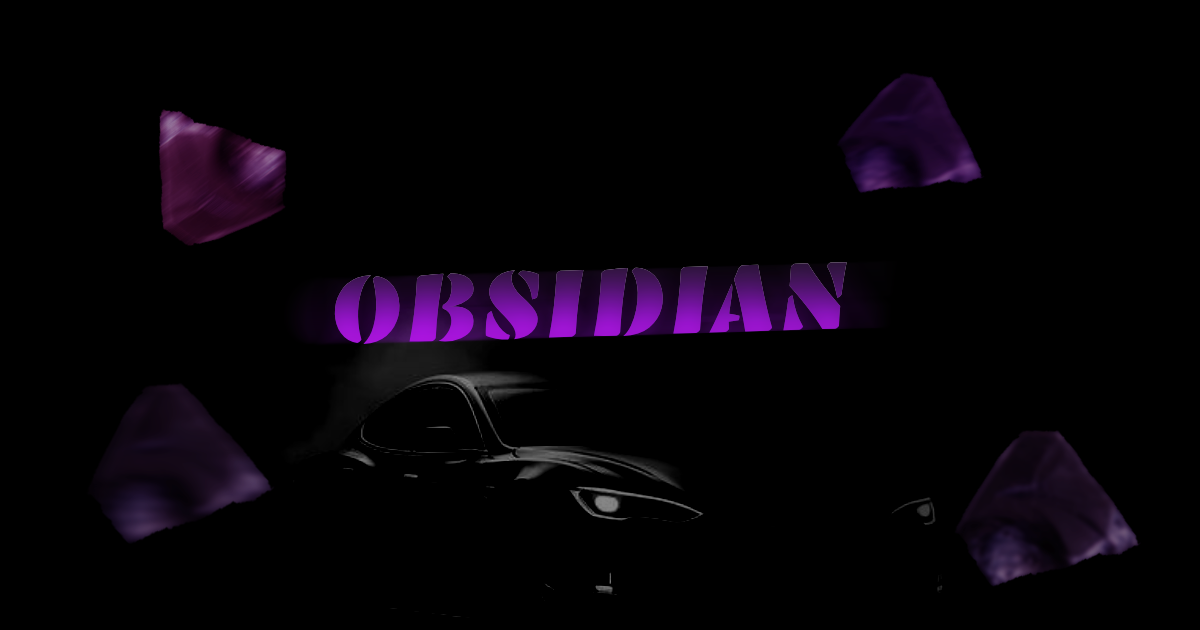
<style>
.page{position:relative;width:1200px;height:630px;background:#000000}
.page>*{position:absolute;margin:0}
.t1{font:99.6px "EmblemaOne-Regular"}
</style>
<div class="page">
<p class="t1" style="left:334px;top:262px;width:513px;height:82px;rotate:-2deg">OBSIDIAN</p>
<p class="t1" style="left:334px;top:262px;width:513px;height:82px;rotate:-2deg">OBSIDIAN</p>
</div>
